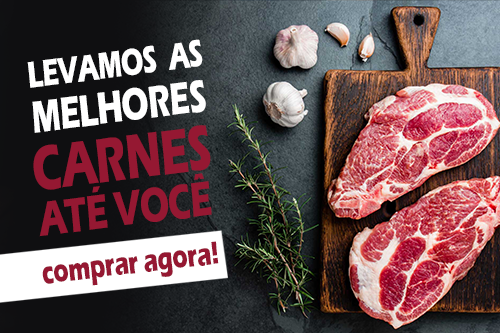
<style>
.page{position:relative;width:500px;height:333px}
.page>*{position:absolute;margin:0}
.t1{font:38.6px "ErasITC-Bold";letter-spacing:-0.02em;color:#ffffff;scale:0.67 1}
.t2{font:46.6px "ErasITC-Bold";letter-spacing:-0.02em;color:#ffffff;scale:0.67 1}
.t3{font:40px "ErasITC-Bold";letter-spacing:-0.02em;color:#ffffff;scale:0.67 1}
.t4{font:64.9px "ErasITC-Bold";letter-spacing:-0.02em;color:#951832;scale:0.67 1}
.t5{font:48.4px "ErasITC-Bold";letter-spacing:-0.02em;color:#ffffff;scale:0.67 1}
.t6{font:50.1px "ErasITC-Bold";letter-spacing:-0.02em;color:#951832;scale:0.67 1}
.t7{font:53.8px "ErasITC-Bold";letter-spacing:-0.02em;color:#ffffff;scale:0.67 1}
.t8{font:32.9px "ErasITC-Bold";letter-spacing:-0.02em;color:#951832;scale:0.72 1}
.t9{font:41.3px "ErasITC-Bold";letter-spacing:-0.02em;color:#ffffff;scale:0.72 1}
</style>
<div class="page">
<p class="t1" style="left:27px;top:39px;width:176px;height:49px;rotate:-7deg">LEVAMOS  AS</p>
<p class="t2" style="left:32px;top:80px;width:174px;height:53px;rotate:-7deg"><span class="t3"><br></span>MELHORES</p>
<p class="t4" style="left:33px;top:125px;width:178px;height:65px;rotate:-7deg"><span class="t5"><br></span>CARNES</p>
<p class="t6" style="left:39px;top:173px;width:173px;height:64px;rotate:-7deg"><span class="t7"><br></span>ATÉ VOCÊ</p>
<p class="t8" style="left:42px;top:241px;width:177px;height:45px;rotate:-7deg"><span class="t9"><br></span>comprar agora!</p>
</div>
